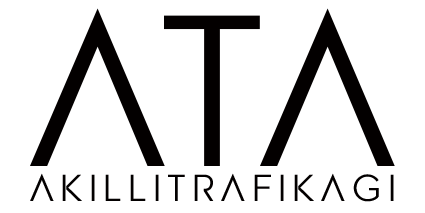
<style>
.page{position:relative;width:425px;height:213px;background:#ffffff}
.page>*{position:absolute;margin:0}
.t1{font:206px "Pasajero";color:#030000}
.t2{font:36px "Pasajero";color:#030000}
</style>
<div class="page">
<p class="t1" style="left:30px;top:8px;width:365px;height:158px">ATA</p>
<p class="t2" style="left:30px;top:173px;width:364px;height:29px">AKILLITRAfIKAGI</p>
</div>
